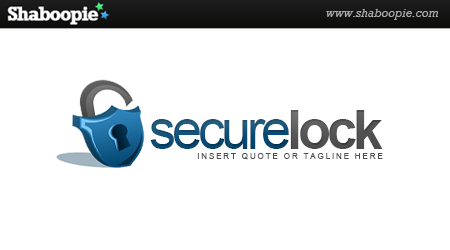
<style>
.page{position:relative;width:450px;height:250px;background:#ffffff}
.page>*{position:absolute;margin:0}
.t1{font:54.2px "ArialMT";letter-spacing:-0.075em;color:#054a75}
.t2{font:54.2px "Arial-BoldMT";letter-spacing:-0.075em;color:#595959}
.t3{font:8.3px "ArialMT";letter-spacing:0.2em;color:#4c4c4c}
</style>
<div class="page">
<p class="t1" style="left:150px;top:110px;width:233px;height:39px">secure<span class="t2">lock</span></p>
<p class="t3" style="left:197px;top:153px;width:186px;height:7px">INSERT QUOTE OR TAGLINE HERE</p>
</div>
